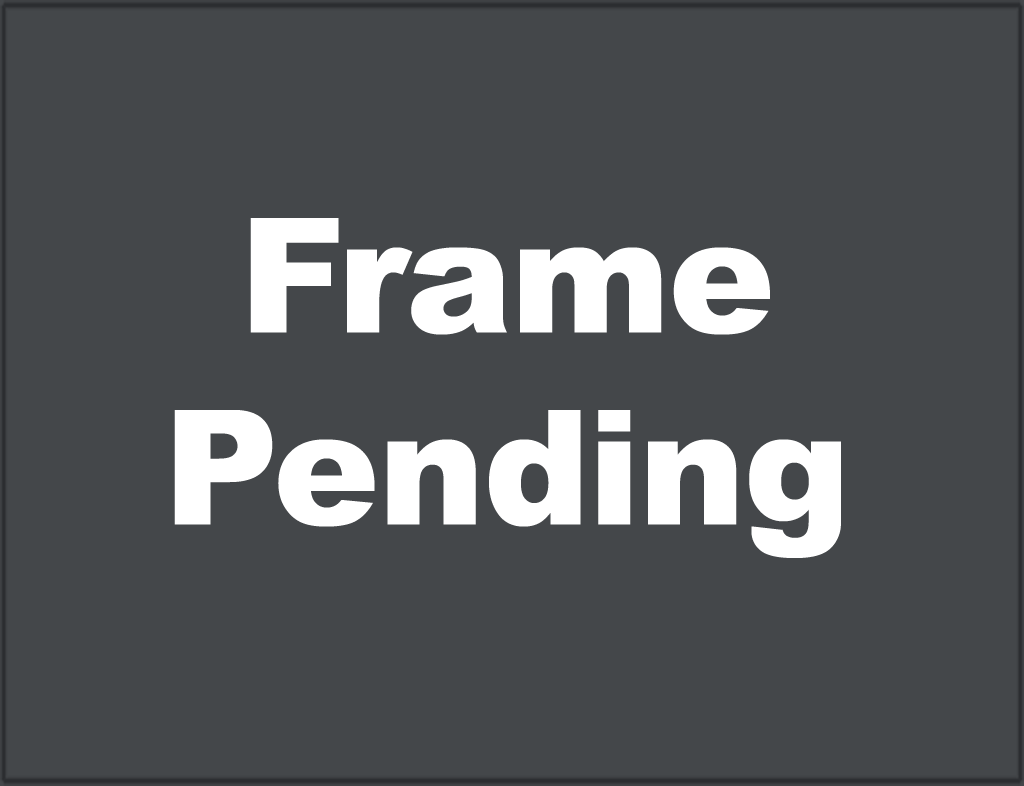
<style>
.page{position:relative;width:1024px;height:786px;background:#44474a}
.page>*{position:absolute;margin:0}
.t1{font:160px "Arial-Black";color:#ffffff}
</style>
<div class="page">
<p class="t1" style="left:174px;top:218px;width:667px;height:340px;text-align:center">Frame<br>Pending</p>
</div>
